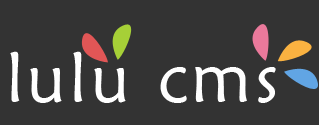
<style>
.page{position:relative;width:319px;height:125px;background:#333333}
.page>*{position:absolute;margin:0}
.t1{font:70px "STXinwei";letter-spacing:0.05em;color:#ffffff}
.t2{font:70px "STXinwei";letter-spacing:0.05em;color:#fefefe}
</style>
<div class="page">
<p class="t1" style="left:10px;top:51px;width:116px;height:52px">lulu</p>
<p class="t2" style="left:160px;top:67px;width:116px;height:36px">cms</p>
</div>
